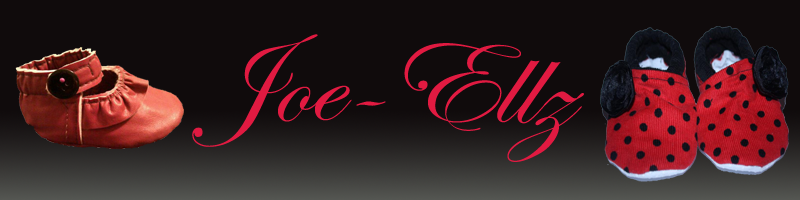
<style>
.page{position:relative;width:800px;height:200px;background:#100b0c}
.page>*{position:absolute;margin:0}
.t1{font:125px "EdwardianScriptITC";color:#e11a41}
</style>
<div class="page">
<p class="t1" style="left:192px;top:34px;width:392px;height:128px">Joe-Ellz</p>
</div>
